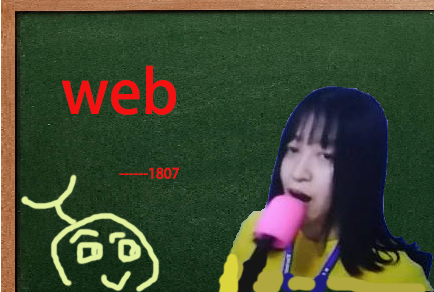
<style>
.page{position:relative;width:434px;height:292px}
.page>*{position:absolute;margin:0}
.t1{font:14px "AdobeHeitiStd-Regular";color:#f51111}
.t2{font:60px "AdobeHeitiStd-Regular";color:#f51111}
</style>
<div class="page">
<p class="t1" style="left:62px;top:65px;width:117px;height:114px"><span class="t2">web<br>                   </span>     ------1807</p>
</div>
